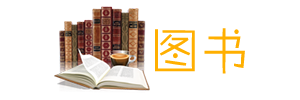
<style>
.page{position:relative;width:300px;height:100px;background:#ffffff}
.page>*{position:absolute;margin:0}
.t1{font:49.6px "FZZHYK--GBK1-0";color:#ffaf00}
</style>
<div class="page">
<p class="t1" style="left:155px;top:28px;width:90px;height:46px">图书</p>
</div>
